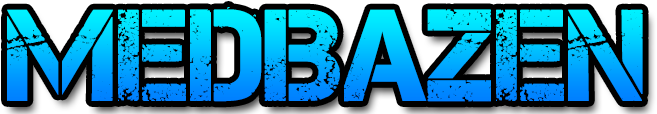
<style>
.page{position:relative;width:657px;height:114px;background:#000000}
.page>*{position:absolute;margin:0}
.t1{font:130px "Captureit"}
</style>
<div class="page">
<p class="t1" style="left:7px;top:7px;width:636px;height:95px">MEDBAZEN</p>
</div>
